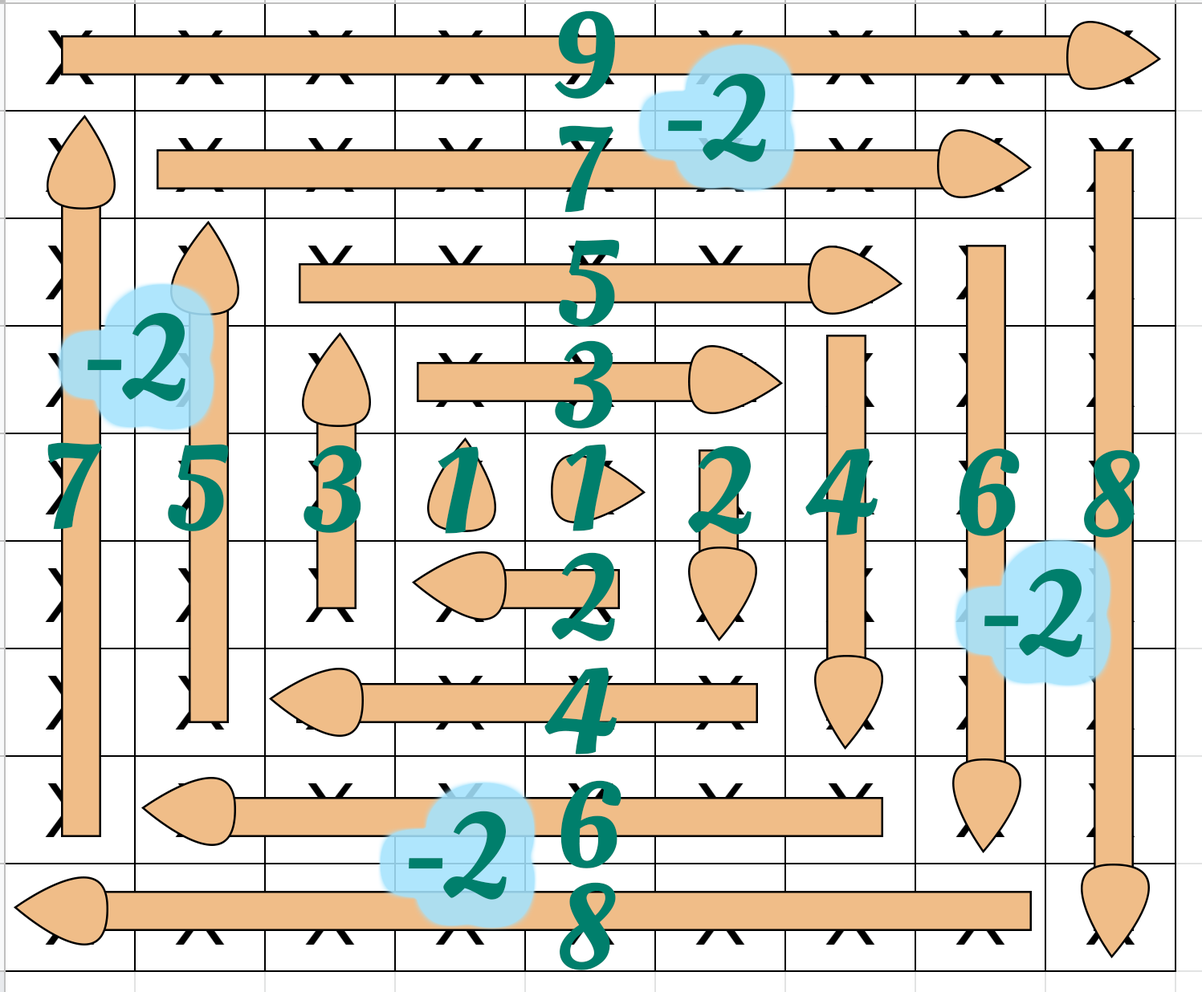
<style>
.page{position:relative;width:1202px;height:992px;background:#ffffff}
.page>*{position:absolute;margin:0}
.t1{font:121.2px "OleoScript-Regular";color:#007f6c}
</style>
<div class="page">
<p class="t1" style="left:554px;top:10px;width:61px;height:89px">9</p>
<p class="t1" style="left:668px;top:73px;width:98px;height:89px">-2</p>
<p class="t1" style="left:559px;top:125px;width:54px;height:88px">7</p>
<p class="t1" style="left:559px;top:239px;width:61px;height:88px">5</p>
<p class="t1" style="left:88px;top:312px;width:97px;height:89px">-2</p>
<p class="t1" style="left:555px;top:340px;width:58px;height:89px">3</p>
<p class="t1" style="left:47px;top:442px;width:55px;height:88px">7</p>
<p class="t1" style="left:168px;top:444px;width:61px;height:87px">5</p>
<p class="t1" style="left:303px;top:445px;width:59px;height:88px">3</p>
<p class="t1" style="left:438px;top:446px;width:40px;height:88px">1</p>
<p class="t1" style="left:565px;top:444px;width:41px;height:87px">1</p>
<p class="t1" style="left:688px;top:446px;width:63px;height:89px">2</p>
<p class="t1" style="left:805px;top:448px;width:73px;height:87px">4</p>
<p class="t1" style="left:959px;top:448px;width:61px;height:88px">6</p>
<p class="t1" style="left:1084px;top:450px;width:56px;height:88px">8</p>
<p class="t1" style="left:552px;top:552px;width:63px;height:89px">2</p>
<p class="t1" style="left:984px;top:568px;width:98px;height:89px">-2</p>
<p class="t1" style="left:544px;top:667px;width:73px;height:88px">4</p>
<p class="t1" style="left:560px;top:780px;width:61px;height:89px">6</p>
<p class="t1" style="left:409px;top:811px;width:98px;height:89px">-2</p>
<p class="t1" style="left:560px;top:882px;width:56px;height:89px">8</p>
</div>
